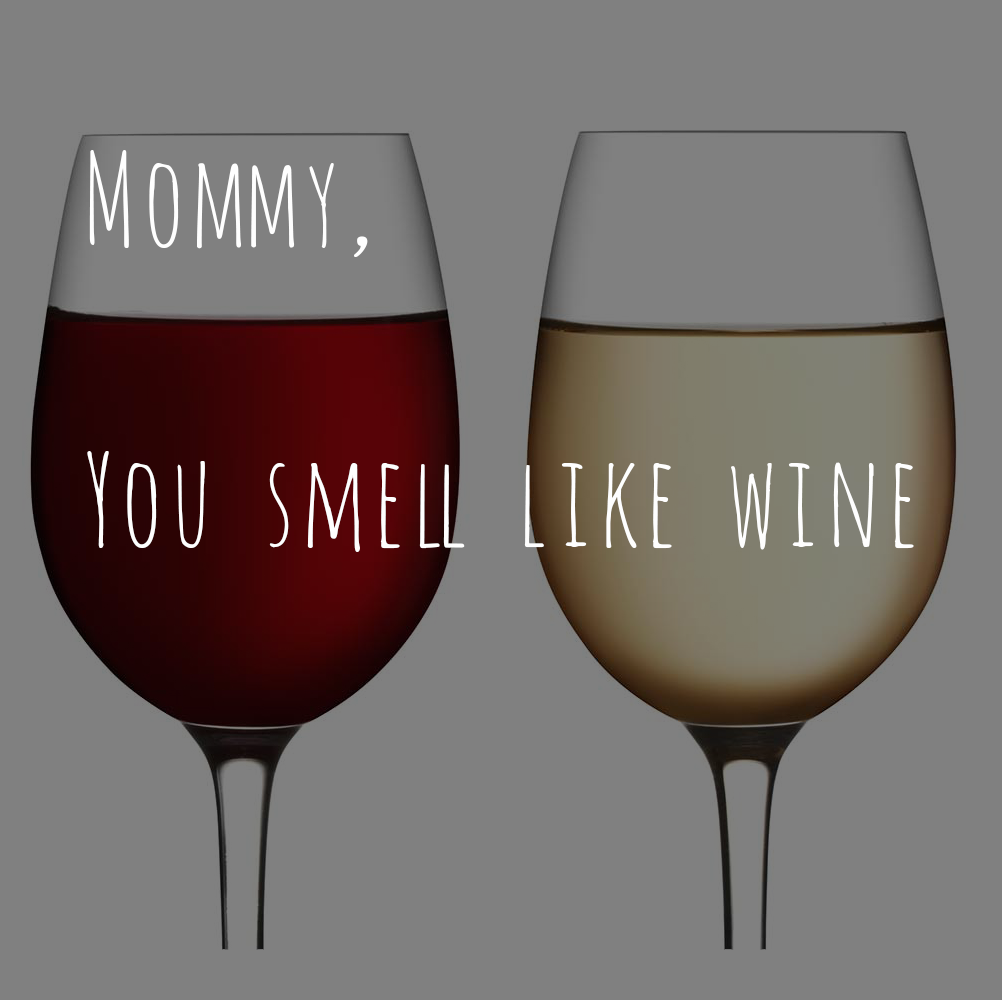
<style>
.page{position:relative;width:1002px;height:1000px;background:#808080}
.page>*{position:absolute;margin:0}
.t1{font:125px "Amatic";color:#fefefe}
</style>
<div class="page">
<p class="t1" style="left:87px;top:150px;width:827px;height:402px">Mommy,<br><br>You smell like wine</p>
</div>
